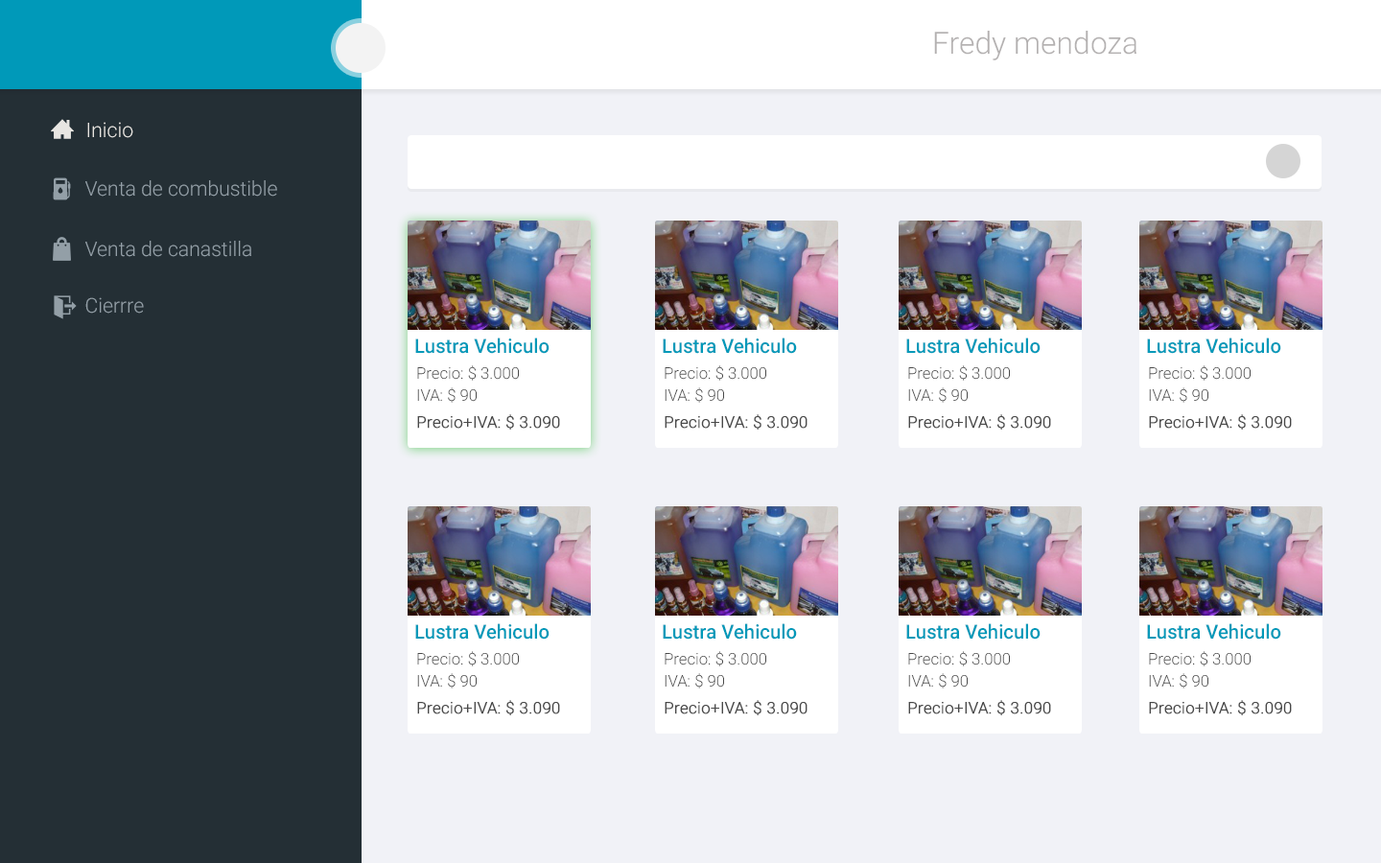
<style>
.page{position:relative;width:1381px;height:863px;background:#f1f2f7}
.page>*{position:absolute;margin:0}
.t1{font:30.7px "Roboto-Light";color:#b4b1b1}
.t2{font:20.3px "Roboto-Light";color:#e8e6e2}
.t3{font:20.3px "Roboto-Light";color:#939fa7}
.t4{font:19.6px "Roboto-Medium";color:#0099b9}
.t5{font:16.2px "Roboto-Light";color:#494949}
.t6{font:16.2px "Roboto-Light";color:#494949;font-weight:bold}
</style>
<div class="page">
<p class="t1" style="left:934px;top:31px;width:203px;height:29px">Fredy mendoza</p>
<p class="t2" style="left:87px;top:122px;width:46px;height:16px">Inicio</p>
<p class="t3" style="left:85px;top:180px;width:192px;height:17px">Venta de combustible</p>
<p class="t3" style="left:85px;top:241px;width:166px;height:16px">Venta de canastilla</p>
<p class="t3" style="left:85px;top:297px;width:59px;height:17px">Cierrre</p>
<p class="t4" style="left:415px;top:338px;width:135px;height:16px">Lustra Vehiculo</p>
<p class="t4" style="left:663px;top:338px;width:134px;height:16px">Lustra Vehiculo</p>
<p class="t4" style="left:906px;top:338px;width:135px;height:16px">Lustra Vehiculo</p>
<p class="t4" style="left:1147px;top:338px;width:135px;height:16px">Lustra Vehiculo</p>
<p class="t5" style="left:417px;top:365px;width:102px;height:16px">Precio: $ 3.000</p>
<p class="t5" style="left:665px;top:365px;width:101px;height:16px">Precio: $ 3.000</p>
<p class="t5" style="left:908px;top:365px;width:102px;height:16px">Precio: $ 3.000</p>
<p class="t5" style="left:1149px;top:365px;width:102px;height:16px">Precio: $ 3.000</p>
<p class="t5" style="left:417px;top:388px;width:60px;height:15px">IVA: $ 90</p>
<p class="t5" style="left:665px;top:388px;width:59px;height:15px">IVA: $ 90</p>
<p class="t5" style="left:908px;top:388px;width:60px;height:15px">IVA: $ 90</p>
<p class="t5" style="left:1149px;top:388px;width:60px;height:15px">IVA: $ 90</p>
<p class="t6" style="left:417px;top:414px;width:143px;height:16px">Precio+IVA: $ 3.090</p>
<p class="t6" style="left:665px;top:414px;width:143px;height:16px">Precio+IVA: $ 3.090</p>
<p class="t6" style="left:908px;top:414px;width:143px;height:16px">Precio+IVA: $ 3.090</p>
<p class="t6" style="left:1149px;top:414px;width:143px;height:16px">Precio+IVA: $ 3.090</p>
<p class="t4" style="left:415px;top:623px;width:135px;height:17px">Lustra Vehiculo</p>
<p class="t4" style="left:663px;top:623px;width:134px;height:17px">Lustra Vehiculo</p>
<p class="t4" style="left:906px;top:623px;width:135px;height:17px">Lustra Vehiculo</p>
<p class="t4" style="left:1147px;top:623px;width:135px;height:17px">Lustra Vehiculo</p>
<p class="t5" style="left:417px;top:651px;width:102px;height:16px">Precio: $ 3.000</p>
<p class="t5" style="left:665px;top:651px;width:101px;height:16px">Precio: $ 3.000</p>
<p class="t5" style="left:908px;top:651px;width:102px;height:16px">Precio: $ 3.000</p>
<p class="t5" style="left:1149px;top:651px;width:102px;height:16px">Precio: $ 3.000</p>
<p class="t5" style="left:417px;top:673px;width:60px;height:16px">IVA: $ 90</p>
<p class="t5" style="left:665px;top:673px;width:59px;height:16px">IVA: $ 90</p>
<p class="t5" style="left:908px;top:673px;width:60px;height:16px">IVA: $ 90</p>
<p class="t5" style="left:1149px;top:673px;width:60px;height:16px">IVA: $ 90</p>
<p class="t6" style="left:417px;top:700px;width:143px;height:16px">Precio+IVA: $ 3.090</p>
<p class="t6" style="left:665px;top:700px;width:143px;height:16px">Precio+IVA: $ 3.090</p>
<p class="t6" style="left:908px;top:700px;width:143px;height:16px">Precio+IVA: $ 3.090</p>
<p class="t6" style="left:1149px;top:700px;width:143px;height:16px">Precio+IVA: $ 3.090</p>
</div>
